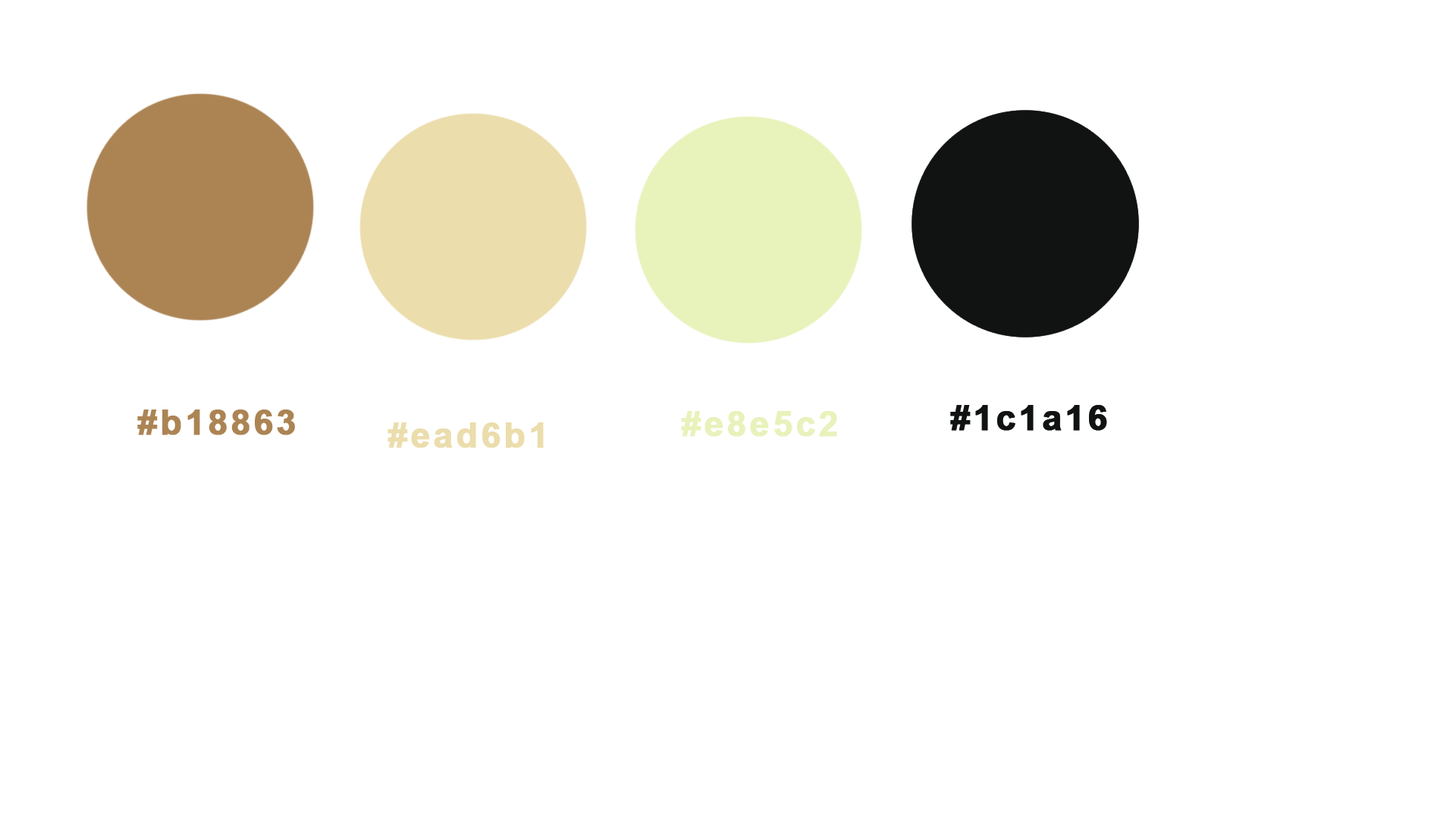
<style>
.page{position:relative;width:1456px;height:819px;background:#ffffff}
.page>*{position:absolute;margin:0}
.t1{font:34.8px "Arial-BoldMT";letter-spacing:0.075em;color:#ac8454;font-weight:bold}
.t2{font:34.8px "Arial-BoldMT";letter-spacing:0.075em;color:#e8f2bb;font-weight:bold}
.t3{font:34.8px "Arial-BoldMT";letter-spacing:0.075em;color:#101211;font-weight:bold}
.t4{font:34.8px "Arial-BoldMT";letter-spacing:0.075em;color:#ebddac;font-weight:bold}
</style>
<div class="page">
<p class="t1" style="left:137px;top:409px;width:158px;height:26px">#b18863</p>
<p class="t2" style="left:681px;top:411px;width:156px;height:26px">#e8e5c2</p>
<p class="t3" style="left:950px;top:405px;width:157px;height:26px">#1c1a16</p>
<p class="t4" style="left:388px;top:422px;width:156px;height:26px">#ead6b1</p>
</div>
